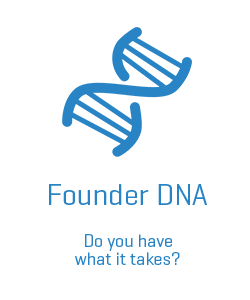
<style>
.page{position:relative;width:250px;height:300px;background:#ffffff}
.page>*{position:absolute;margin:0}
.t1{font:30px "Geogrotesque-Regular";color:#2884c5}
.t2{font:18px/18px "Geogrotesque-Regular";color:#2884c5}
</style>
<div class="page">
<p class="t1" style="left:49px;top:184px;width:158px;height:21px">Founder DNA</p>
<p class="t2" style="left:75px;top:234px;width:105px;height:31px;text-align:center">Do you have what it takes?</p>
</div>
